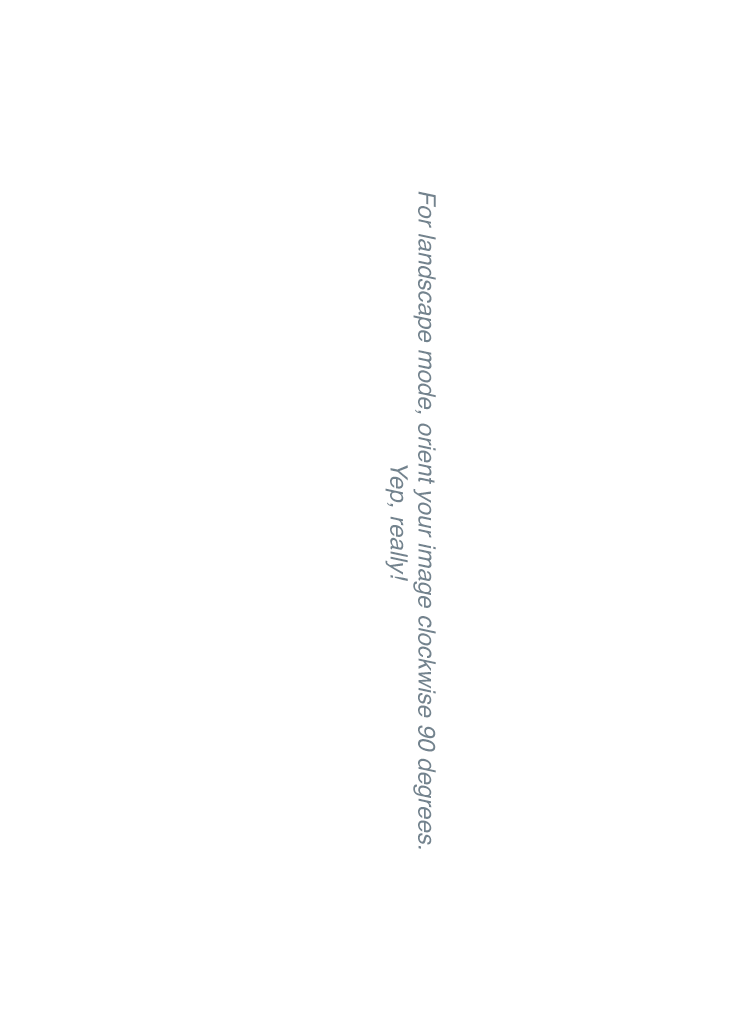
<style>
.page{position:relative;width:748px;height:1024px;background:#ffffff}
.page>*{position:absolute;margin:0}
.t1{font:24px/28px "Helvetica-Oblique";color:#73838e}
</style>
<div class="page">
<p class="t1" style="left:385px;top:191px;width:51px;height:658px;text-align:center;rotate:90deg">For landscape mode, orient your image clockwise 90 degrees.<br>Yep, really!</p>
</div>
